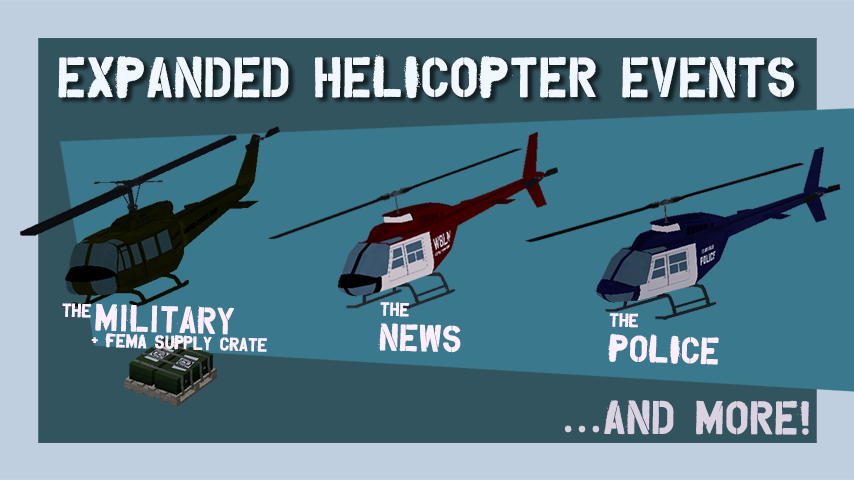
<style>
.page{position:relative;width:854px;height:480px;background:#3a798d}
.page>*{position:absolute;margin:0}
.t1{font:43.2px "Overspray";color:#feefff;font-weight:bold}
.t2{font:14.4px "Overspray";color:#feefff;font-weight:bold}
.t3{font:28.8px "Overspray";color:#feefff;font-weight:bold}
.t4{font:36px "Overspray";color:#dad2e1;font-weight:bold}
</style>
<div class="page">
<p class="t1" style="left:58px;top:54px;width:736px;height:45px">EXPANDED HELICOPTER EVENTS</p>
<p class="t2" style="left:62px;top:303px;width:29px;height:15px;rotate:2deg">The</p>
<p class="t3" style="left:95px;top:303px;width:139px;height:37px;rotate:2deg">Military</p>
<p class="t3" style="left:378px;top:302px;width:83px;height:51px;rotate:2deg"><span class="t2">THE</span> NEWS</p>
<p class="t3" style="left:608px;top:313px;width:111px;height:52px;rotate:2deg"><span class="t2">The<br></span>POLICE</p>
<p class="t2" style="left:91px;top:333px;width:176px;height:19px;rotate:2deg">+ FEMA Supply Crate</p>
<p class="t4" style="left:564px;top:400px;width:245px;height:35px">...AND MORE!</p>
</div>
